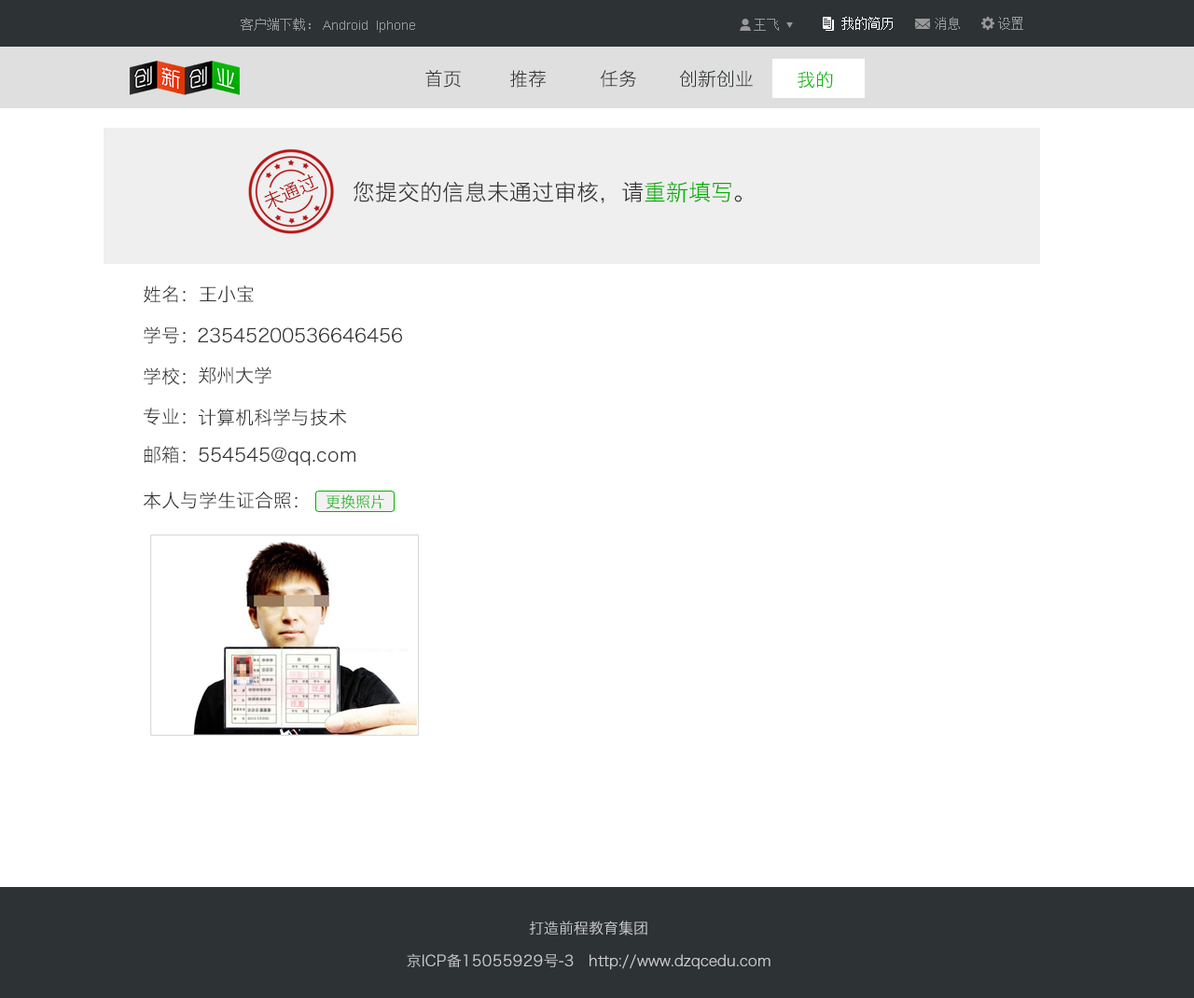
<style>
.page{position:relative;width:1194px;height:998px;background:#ffffff}
.page>*{position:absolute;margin:0}
.t1{font:13.1px "SimSun";color:#999999}
.t2{font:13.1px "SimSun";color:#ffffff}
.t3{font:13.1px "ArialMT";color:#999999}
.t4{font:18.7px "HiraginoSansGB-W3";color:#333333}
.t5{font:18.7px "HiraginoSansGB-W3";color:#2d3235}
.t6{font:18.7px "HiraginoSansGB-W3";color:#09b908}
.t7{font:18.7px "HiraginoSansGB-W3";color:#ab0000}
.t8{font:22.4px "HiraginoSansGB-W3";color:#333333}
.t9{font:22.4px "HiraginoSansGB-W3";color:#05ae04}
.t10{font:14.9px "HiraginoSansGB-W3";color:#00b300}
.t11{font:14.9px "HiraginoSansGB-W3";color:#cccccc}
</style>
<div class="page">
<p class="t1" style="left:241px;top:18px;width:70px;height:13px">客户端下载：</p>
<p class="t2" style="left:842px;top:17px;width:51px;height:13px">我的简历</p>
<p class="t1" style="left:935px;top:17px;width:25px;height:13px">消息</p>
<p class="t1" style="left:998px;top:17px;width:26px;height:13px">设置</p>
<p class="t3" style="left:323px;top:21px;width:92px;height:12px">Android  Iphone</p>
<p class="t1" style="left:754px;top:19px;width:25px;height:12px">王飞</p>
<p class="t4" style="left:425px;top:70px;width:36px;height:18px">首页</p>
<p class="t4" style="left:510px;top:70px;width:36px;height:18px">推荐</p>
<p class="t4" style="left:600px;top:70px;width:36px;height:18px">任务</p>
<p class="t5" style="left:679px;top:70px;width:74px;height:18px">创新创业</p>
<p class="t6" style="left:798px;top:71px;width:35px;height:18px">我的</p>
<p class="t7" style="left:264px;top:174px;width:54px;height:35px;rotate:-23deg">未通过</p>
<p class="t8" style="left:353px;top:181px;width:389px;height:22px">您提交的信息未通过审核，请<span class="t9">重新填写</span>。</p>
<p class="t4" style="left:144px;top:286px;width:42px;height:17px">姓名：</p>
<p class="t4" style="left:200px;top:286px;width:54px;height:16px">王小宝</p>
<p class="t4" style="left:144px;top:327px;width:42px;height:17px">学号：</p>
<p class="t4" style="left:198px;top:328px;width:204px;height:15px">23545200536646456</p>
<p class="t4" style="left:144px;top:368px;width:42px;height:17px">学校：</p>
<p class="t4" style="left:198px;top:367px;width:74px;height:17px">郑州大学</p>
<p class="t4" style="left:144px;top:408px;width:42px;height:17px">专业：</p>
<p class="t4" style="left:199px;top:409px;width:148px;height:17px">计算机科学与技术</p>
<p class="t4" style="left:144px;top:446px;width:42px;height:18px">邮箱：</p>
<p class="t4" style="left:199px;top:447px;width:157px;height:20px">554545@qq.com</p>
<p class="t4" style="left:143px;top:492px;width:155px;height:17px">本人与学生证合照：</p>
<p class="t10" style="left:326px;top:495px;width:58px;height:14px">更换照片</p>
<p class="t11" style="left:529px;top:921px;width:119px;height:15px">打造前程教育集团</p>
<p class="t11" style="left:407px;top:954px;width:364px;height:16px">京ICP备15055929号-3   http://www.dzqcedu.com</p>
</div>
